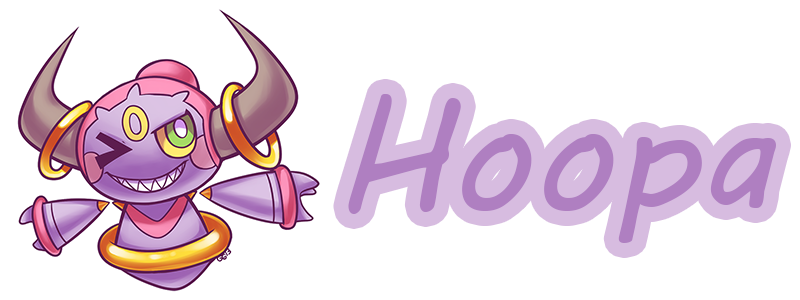
<style>
.page{position:relative;width:800px;height:300px;background:#ffffff}
.page>*{position:absolute;margin:0}
.t1{font:154.2px "MVBoli";color:#af7fc1}
</style>
<div class="page">
<p class="t1" style="left:348px;top:94px;width:428px;height:149px">Hoopa</p>
</div>
